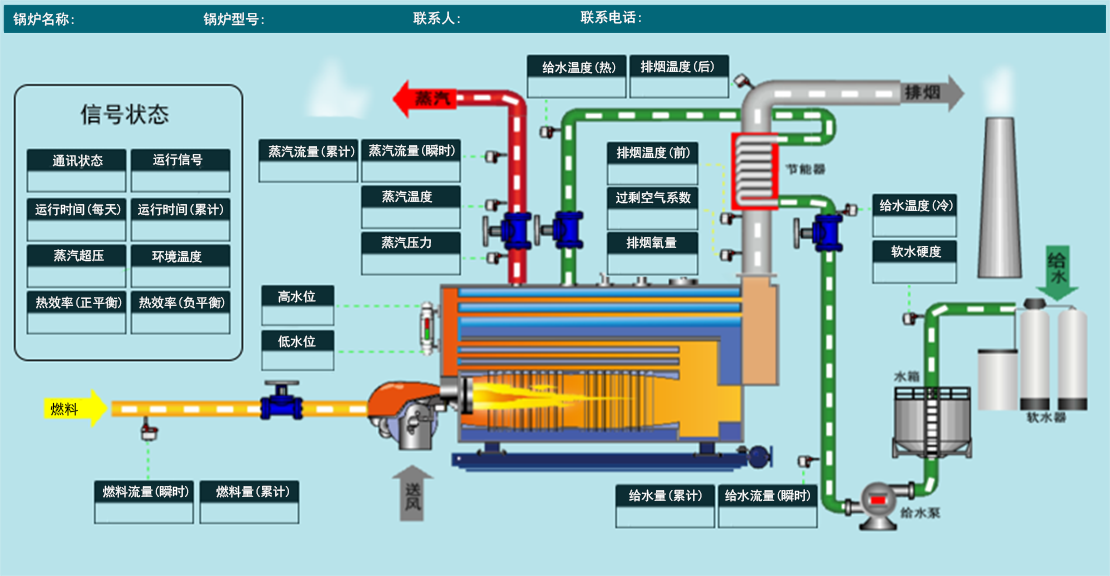
<style>
.page{position:relative;width:1110px;height:576px;background:#b8e3ea}
.page>*{position:absolute;margin:0}
.t1{font:14px "SimHei";color:#ffffff}
.t2{font:12.6px "SimHei";color:#ffffff}
.t3{font:14px "SimHei";color:#000000}
</style>
<div class="page">
<p class="t1" style="left:13px;top:12px;width:61px;height:14px">锅炉名称:</p>
<p class="t1" style="left:203px;top:12px;width:61px;height:14px">锅炉型号:</p>
<p class="t1" style="left:413px;top:11px;width:47px;height:14px">联系人:</p>
<p class="t1" style="left:580px;top:10px;width:61px;height:14px">联系电话:</p>
<p class="t2" style="left:542px;top:61px;width:74px;height:13px">给水温度(热)</p>
<p class="t2" style="left:640px;top:60px;width:74px;height:13px">排烟温度(后)</p>
<p class="t2" style="left:268px;top:145px;width:87px;height:13px">蒸汽流量(累计)</p>
<p class="t2" style="left:369px;top:144px;width:86px;height:13px">蒸汽流量(瞬时)</p>
<p class="t2" style="left:616px;top:146px;width:74px;height:13px">排烟温度(前)</p>
<p class="t2" style="left:52px;top:154px;width:51px;height:13px">通讯状态</p>
<p class="t2" style="left:153px;top:153px;width:50px;height:13px">运行信号</p>
<p class="t2" style="left:382px;top:190px;width:51px;height:13px">蒸汽温度</p>
<p class="t2" style="left:616px;top:191px;width:75px;height:13px">过剩空气系数</p>
<p class="t2" style="left:35px;top:203px;width:86px;height:13px">运行时间(每天)</p>
<p class="t2" style="left:138px;top:203px;width:85px;height:13px">运行时间(累计)</p>
<p class="t2" style="left:879px;top:199px;width:74px;height:13px">给水温度(冷)</p>
<p class="t2" style="left:381px;top:236px;width:50px;height:13px">蒸汽压力</p>
<p class="t2" style="left:626px;top:236px;width:51px;height:13px">排烟氧量</p>
<p class="t2" style="left:891px;top:245px;width:51px;height:13px">软水硬度</p>
<p class="t2" style="left:54px;top:249px;width:50px;height:13px">蒸汽超压</p>
<p class="t2" style="left:152px;top:250px;width:50px;height:13px">环境温度</p>
<p class="t2" style="left:278px;top:290px;width:38px;height:13px">高水位</p>
<p class="t2" style="left:36px;top:296px;width:86px;height:13px">热效率(正平衡)</p>
<p class="t2" style="left:139px;top:296px;width:86px;height:13px">热效率(负平衡)</p>
<p class="t2" style="left:278px;top:335px;width:38px;height:13px">低水位</p>
<p class="t3" style="left:50px;top:402px;width:28px;height:14px">燃料</p>
<p class="t2" style="left:103px;top:485px;width:86px;height:13px">燃料流量(瞬时)</p>
<p class="t2" style="left:216px;top:485px;width:73px;height:13px">燃料量(累计)</p>
<p class="t2" style="left:629px;top:489px;width:73px;height:13px">给水量(累计)</p>
<p class="t2" style="left:725px;top:489px;width:85px;height:13px">给水流量(瞬时)</p>
</div>
